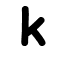
<style>
.page{position:relative;width:64px;height:64px;background:#ffffff}
.page>*{position:absolute;margin:0}
.t1{font:12px "ComicSansMS-Bold";color:#000000}
</style>
<div class="page">
<p class="t1" style="left:21px;top:6px;width:25px;height:40px">k</p>
</div>
